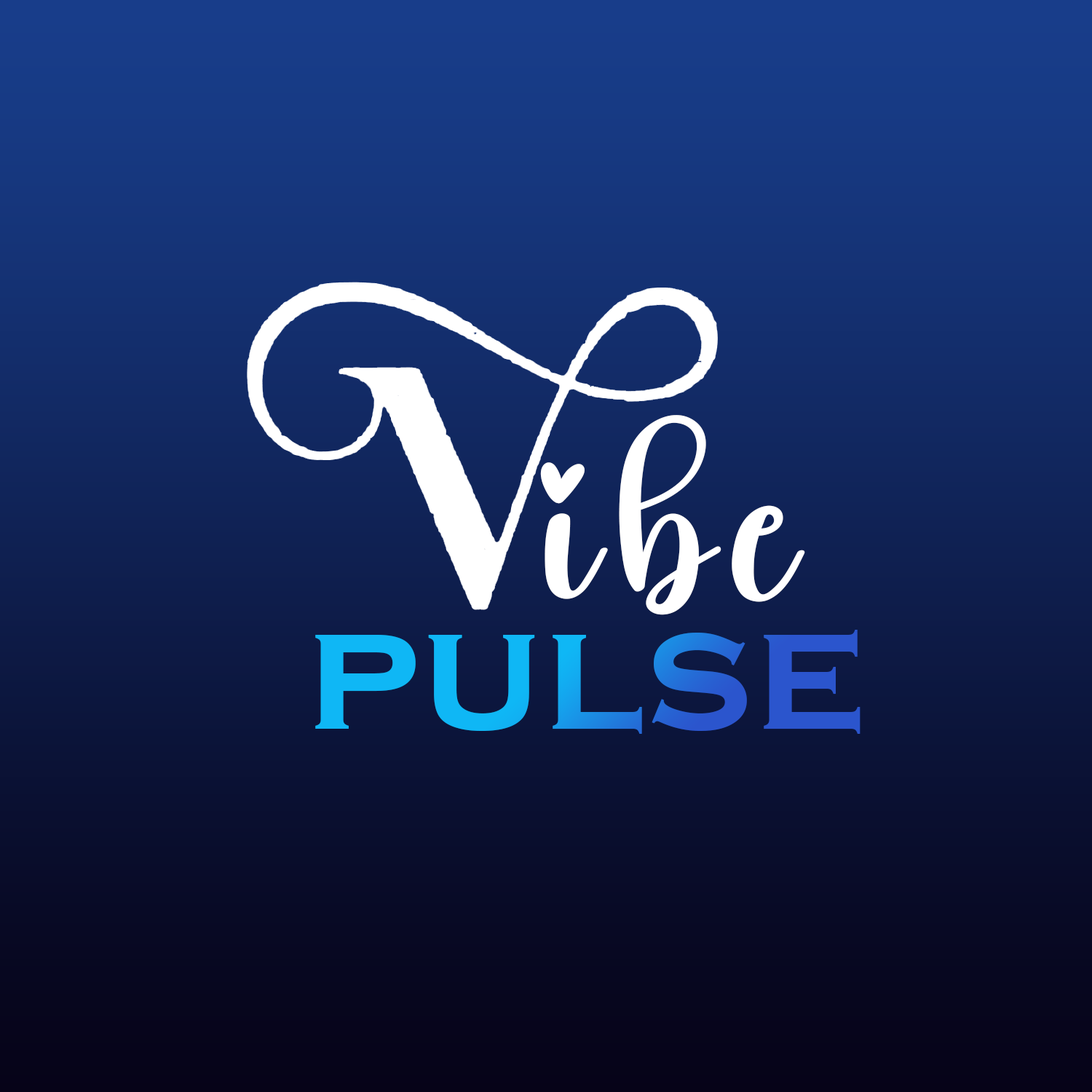
<style>
.page{position:relative;width:1092px;height:1092px}
.page>*{position:absolute;margin:0}
.t1{font:230.8px "DailyRegular";letter-spacing:0.1em;color:#ffffff}
.t2{font:171.8px "CopperplateGothic-Bold";letter-spacing:0.02em}
</style>
<div class="page">
<p class="t1" style="left:540px;top:415px;width:265px;height:200px">ibe</p>
<p class="t2" style="left:315px;top:630px;width:545px;height:104px">pulse</p>
</div>
